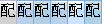
<style>
.page{position:relative;width:102px;height:24px}
.page>*{position:absolute;margin:0}
.t1{font:16.7px "NSimSun";color:#020202}
</style>
<div class="page">
<p class="t1" style="left:1px;top:3px;width:14px;height:14px">配</p>
<p class="t1" style="left:18px;top:3px;width:14px;height:14px">配</p>
<p class="t1" style="left:35px;top:3px;width:14px;height:14px">配</p>
<p class="t1" style="left:52px;top:3px;width:14px;height:14px">配</p>
<p class="t1" style="left:69px;top:3px;width:14px;height:14px">配</p>
<p class="t1" style="left:86px;top:3px;width:14px;height:14px">配</p>
</div>
